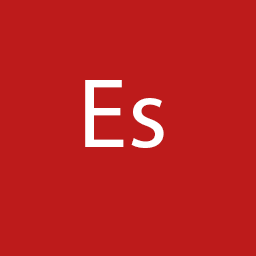
<style>
.page{position:relative;width:256px;height:256px;background:#bd1b1b}
.page>*{position:absolute;margin:0}
.t1{font:100px "MyriadPro-Regular";color:#ffffff}
</style>
<div class="page">
<p class="t1" style="left:85px;top:80px;width:79px;height:68px">Es</p>
</div>
